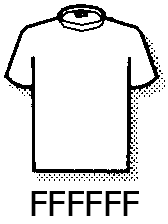
<style>
.page{position:relative;width:168px;height:224px;background:#ffffff}
.page>*{position:absolute;margin:0}
.t1{font:33.3px "HancomGothicBold";color:#000000}
</style>
<div class="page">
<p class="t1" style="left:31px;top:191px;width:108px;height:25px">FFFFFF</p>
</div>
